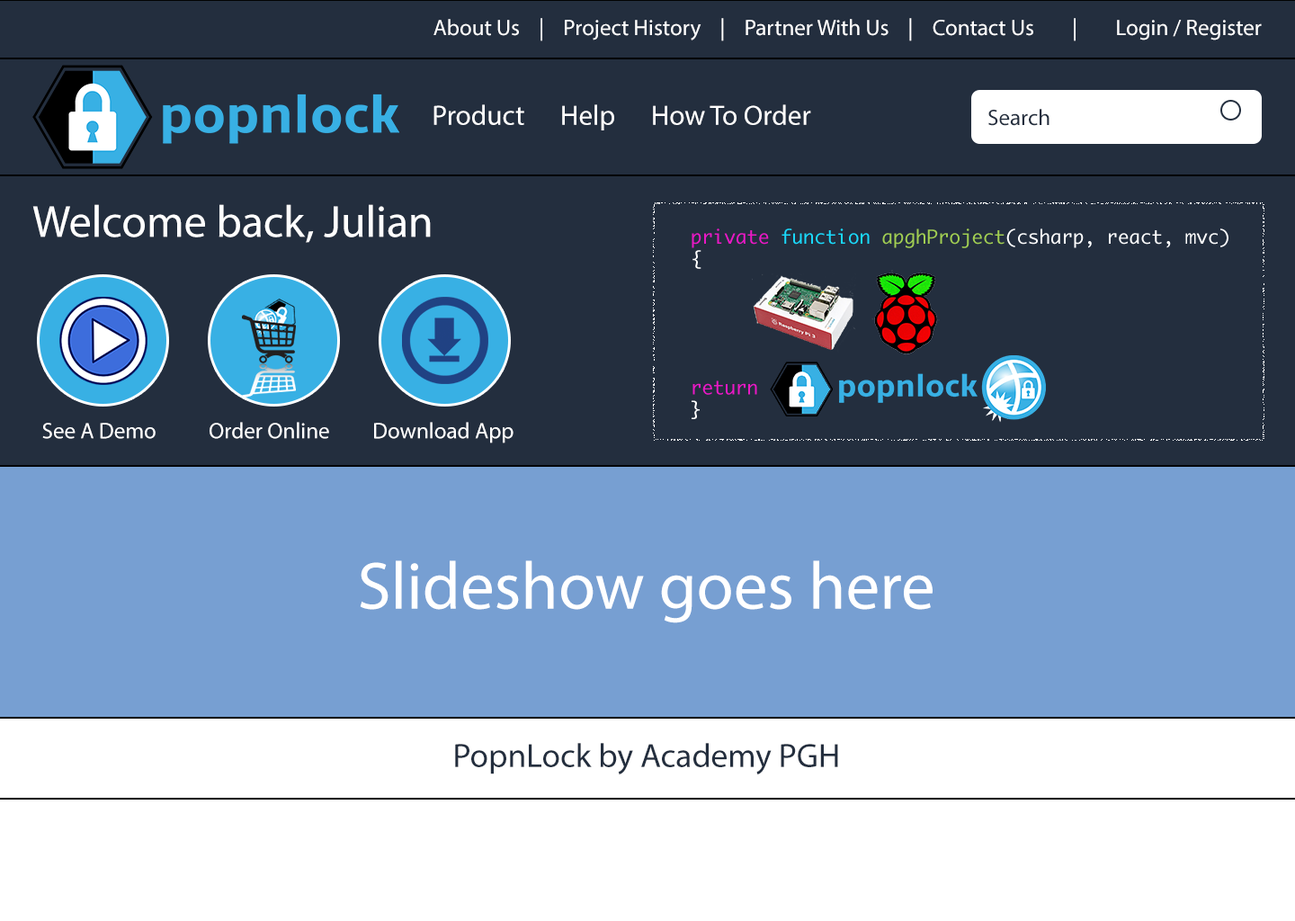
<style>
.page{position:relative;width:1295px;height:921px;background:#232e3e}
.page>*{position:absolute;margin:0}
.t1{font:10.8px/21.5px "MyriadPro-Regular";color:#ffffff}
.t2{font:28.1px "MyriadPro-Regular";color:#ffffff}
.t3{font:10.8px "MyriadPro-Regular";color:#232e3e}
.t4{font:45px "MyriadPro-Regular";color:#ffffff}
.t5{font:67.4px "MyriadPro-Regular";color:#ffffff}
.t6{font:33.7px "MyriadPro-Regular";color:#232e3e}
</style>
<div class="page">
<p class="t1" style="left:433px;top:18px;width:829px;height:23px">About Us    |    Project History    |    Partner With Us    |    Contact Us        |        Login / Register</p>
<p class="t2" style="left:433px;top:104px;width:378px;height:26px">Product      Help      How To Order</p>
<p class="t3" style="left:988px;top:109px;width:61px;height:17px">Search</p>
<p class="t4" style="left:32px;top:204px;width:399px;height:39px">Welcome back, Julian</p>
<p class="t1" style="left:42px;top:422px;width:471px;height:21px">See A Demo           Order Online         Download App</p>
<p class="t5" style="left:360px;top:560px;width:573px;height:63px">Slideshow goes here</p>
<p class="t6" style="left:455px;top:743px;width:383px;height:31px">PopnLock by Academy PGH</p>
</div>
